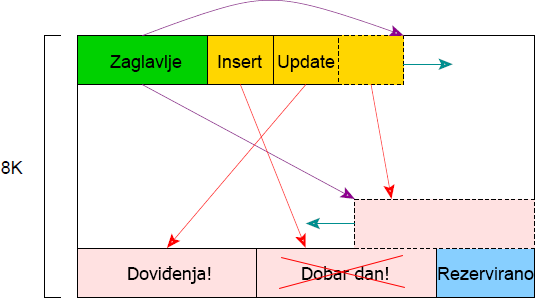
<style>
.page{position:relative;width:535px;height:298px;background:#ffffff}
.page>*{position:absolute;margin:0}
.t1{font:18px "ArialMT";color:#000000}
.t2{font:18px "Tahoma";color:#000000}
</style>
<div class="page">
<p class="t1" style="left:110px;top:55px;width:72px;height:17px">Zaglavlje</p>
<p class="t1" style="left:218px;top:55px;width:44px;height:13px">Insert</p>
<p class="t1" style="left:278px;top:55px;width:57px;height:17px">Update</p>
<p class="t2" style="left:128px;top:266px;width:83px;height:18px">Doviđenja!</p>
<p class="t2" style="left:302px;top:266px;width:87px;height:14px">Dobar dan!</p>
<p class="t1" style="left:438px;top:267px;width:96px;height:13px">Rezervirano</p>
</div>
